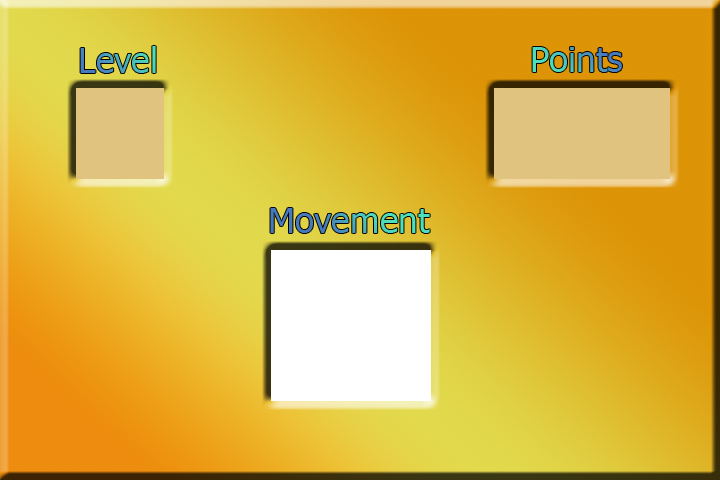
<style>
.page{position:relative;width:720px;height:480px}
.page>*{position:absolute;margin:0}
.t1{font:35.3px "Tahoma"}
</style>
<div class="page">
<p class="t1" style="left:80px;top:46px;width:76px;height:27px">Level</p>
<p class="t1" style="left:532px;top:47px;width:90px;height:25px">Points</p>
<p class="t1" style="left:270px;top:208px;width:160px;height:25px">Movement</p>
</div>
